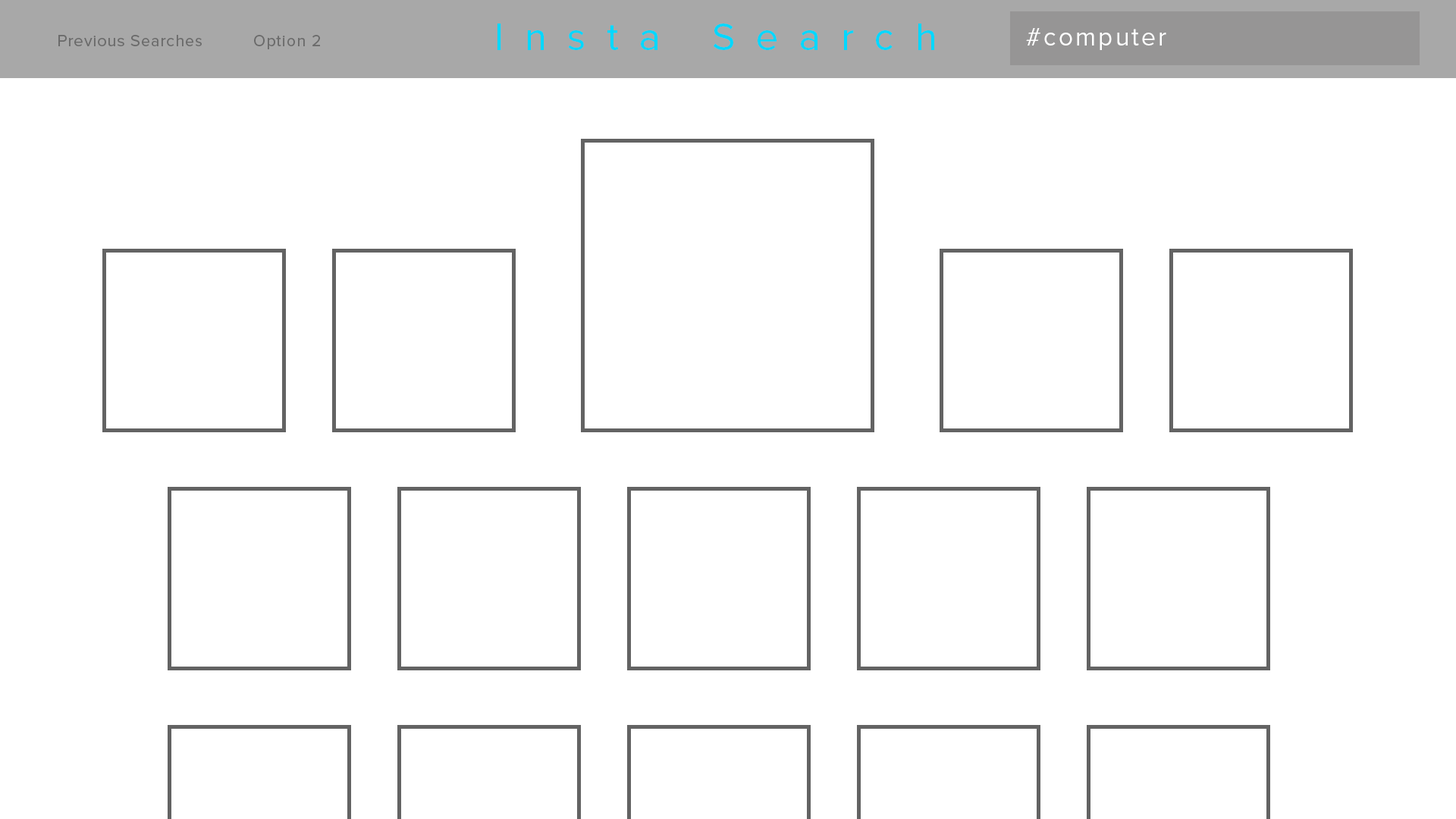
<style>
.page{position:relative;width:1456px;height:819px;background:#ffffff}
.page>*{position:absolute;margin:0}
.t1{font:39.4px "ProximaNova-Regular";letter-spacing:0.53em;color:#00d8ff}
.t2{font:25.6px "ProximaNova-Regular";letter-spacing:0.09em;color:#ffffff}
.t3{font:16.3px "ProximaNova-Regular";letter-spacing:0.05em;color:#6b6b6b}
</style>
<div class="page">
<p class="t1" style="left:497px;top:24px;width:437px;height:26px">Insta Search</p>
<p class="t2" style="left:1026px;top:28px;width:140px;height:22px">#computer</p>
<p class="t3" style="left:58px;top:35px;width:144px;height:11px">Previous Searches</p>
<p class="t3" style="left:254px;top:35px;width:66px;height:14px">Option 2</p>
</div>
